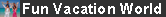
<style>
.page{position:relative;width:166px;height:17px;background:#333333}
.page>*{position:absolute;margin:0}
.t1{font:15px "Arial-BoldMT";color:#ffffff}
.t2{font:18px "Rockwell-ExtraBold";color:#121213}
</style>
<div class="page">
<p class="t1" style="left:23px;top:3px;width:138px;height:11px"><span class="t2"><br></span>Fun Vacation World</p>
</div>
